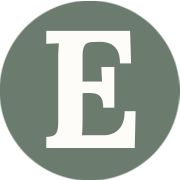
<style>
.page{position:relative;width:180px;height:180px;background:#6b7c6e}
.page>*{position:absolute;margin:0}
.t1{font:167.3px "Lora-Bold";color:#fefcf9}
</style>
<div class="page">
<p class="t1" style="left:46px;top:30px;width:90px;height:118px">E</p>
</div>
